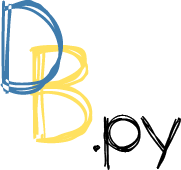
<style>
.page{position:relative;width:181px;height:170px;background:#ffffff}
.page>*{position:absolute;margin:0}
.t1{font:133.3px "theunseen";color:#3f7cad}
.t2{font:133.3px "theunseen";color:#ffe160}
.t3{font:73.3px "theunseen";color:#000000}
</style>
<div class="page">
<p class="t1" style="left:0px;top:0px;width:63px;height:95px">D</p>
<p class="t2" style="left:29px;top:45px;width:64px;height:99px">B</p>
<p class="t3" style="left:93px;top:114px;width:88px;height:56px">.py</p>
</div>
